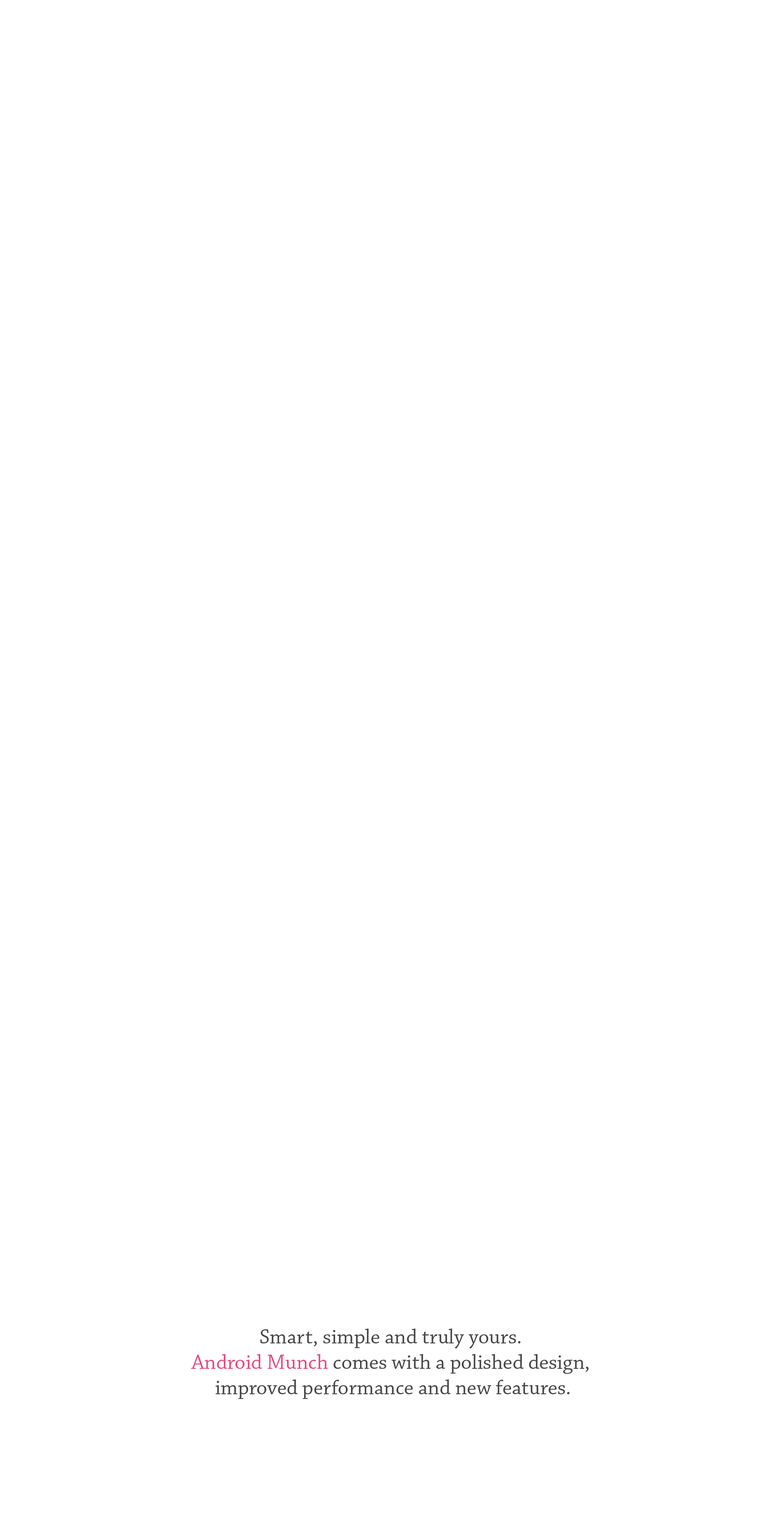
<style>
.page{position:relative;width:780px;height:1529px;background:#ffffff}
.page>*{position:absolute;margin:0}
.t1{font:21.2px "ChaparralPro-Regular";color:#474747}
.t2{font:21.2px "ChaparralPro-Regular";color:#e54b7c}
</style>
<div class="page">
<p class="t1" style="left:191px;top:1329px;width:397px;height:70px;text-align:center">Smart, simple and truly yours. <br><span class="t2">Android Munch</span> comes with a polished design, <br>improved performance and new features.</p>
</div>
